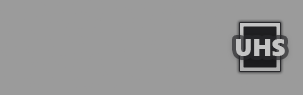
<style>
.page{position:relative;width:303px;height:95px;background:#9b9b9b}
.page>*{position:absolute;margin:0}
.t1{font:24px "SegoeUIBlack";letter-spacing:-0.01em;color:#c4c4c4}
</style>
<div class="page">
<p class="t1" style="left:236px;top:39px;width:49px;height:17px">UHS</p>
</div>
